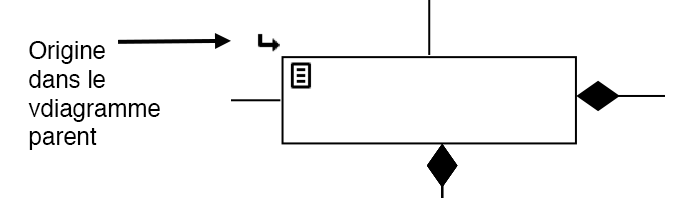
<style>
.page{position:relative;width:700px;height:198px;background:#ffffff}
.page>*{position:absolute;margin:0}
.t1{font:12px "Helvetica";color:#000000}
</style>
<div class="page">
<p class="t1" style="left:28px;top:41px;width:132px;height:109px">Origine<br>dans le <br>vdiagramme<br>parent</p>
</div>
